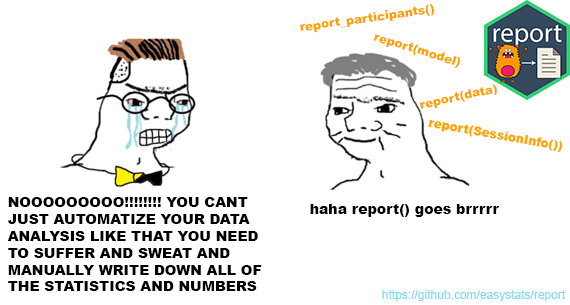
<style>
.page{position:relative;width:570px;height:305px;background:#ffffff}
.page>*{position:absolute;margin:0}
.t1{font:12px "Arial-Black";color:#ffa000}
.t2{font:14px "Arial-Black";color:#000000}
.t3{font:12px "ArialMT";color:#80daff}
</style>
<div class="page">
<p class="t1" style="left:300px;top:4px;width:134px;height:29px;rotate:-8deg">report_participants()</p>
<p class="t1" style="left:373px;top:34px;width:87px;height:34px;rotate:17deg">report(model)</p>
<p class="t1" style="left:420px;top:84px;width:77px;height:25px;rotate:-12deg">report(data)</p>
<p class="t2" style="left:7px;top:197px;width:255px;height:94px">NOOOOOOOOO!!!!!!!! YOU CANT JUST AUTOMATIZE YOUR DATA ANALYSIS LIKE THAT YOU NEED TO SUFFER AND SWEAT AND MANUALLY WRITE DOWN ALL OF THE STATISTICS AND NUMBERS</p>
<p class="t2" style="left:310px;top:204px;width:189px;height:13px">haha report() goes brrrrr</p>
<p class="t3" style="left:382px;top:290px;width:184px;height:11px">https://github.com/easystats/report</p>
</div>
